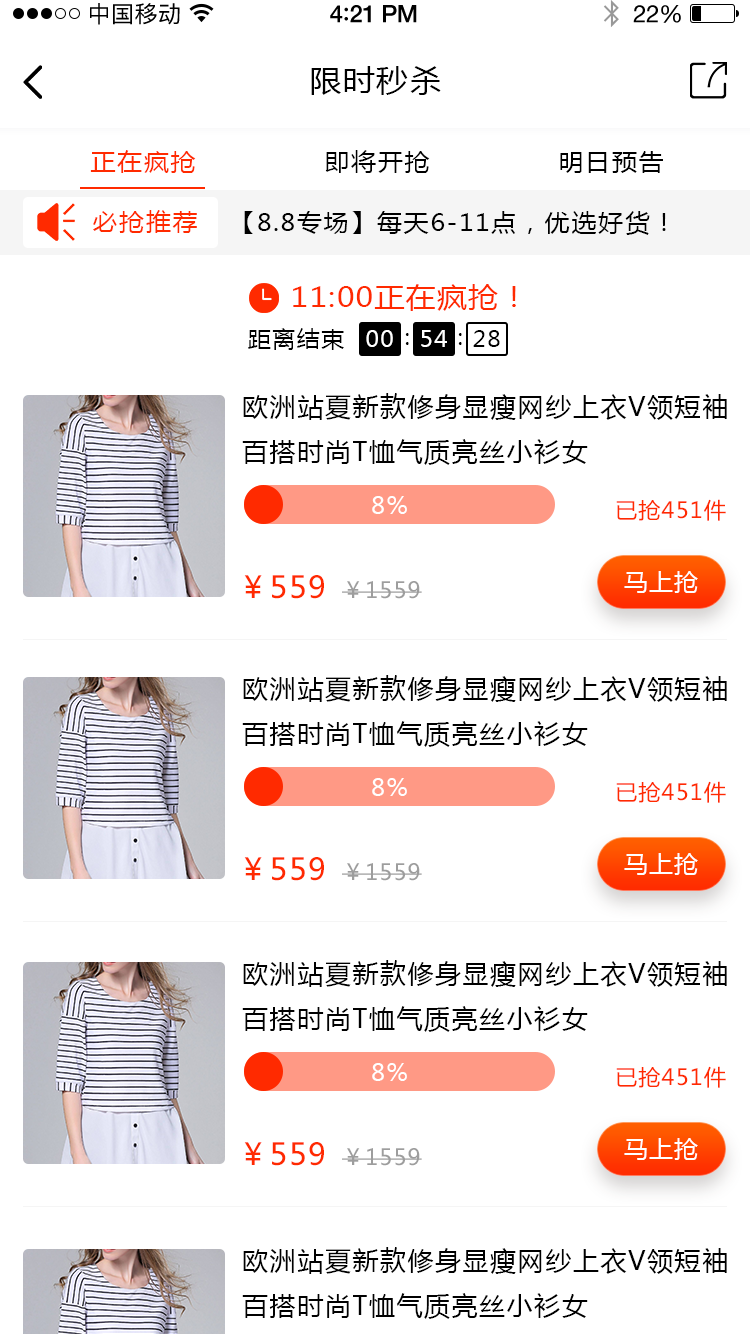
<style>
.page{position:relative;width:750px;height:1334px;background:#ffffff}
.page>*{position:absolute;margin:0}
.t1{font:23px "PingFangSC-Regular";letter-spacing:0.02em;color:#000000}
.t2{font:24px "HelveticaNeue-Medium";letter-spacing:-0.02em;color:#000000}
.t3{font:26px "Avenir-Medium";letter-spacing:-0.02em;color:#000000}
.t4{font:24px "HelveticaNeue";letter-spacing:-0.02em;color:#000000}
.t5{font:30px "MicrosoftYaHei";letter-spacing:0.05em;color:#000000;scale:1.06 1}
.t6{font:24px "MicrosoftYaHei";letter-spacing:0.05em;color:#ff2a00;scale:1.06 1}
.t7{font:24px "MicrosoftYaHei";letter-spacing:0.05em;color:#000000;scale:1.06 1}
.t8{font:28px "MicrosoftYaHei";letter-spacing:0.05em;color:#ff2a00;scale:1.06 1}
.t9{font:22px "MicrosoftYaHei";letter-spacing:0.05em;color:#000000;scale:1.06 1}
.t10{font:22px "MicrosoftYaHei";letter-spacing:0.05em;color:#ffffff;scale:1.06 1}
.t11{font:26px "MicrosoftYaHei";letter-spacing:0.06em;color:#000000;text-transform:uppercase}
.t12{font:24px "MicrosoftYaHei";letter-spacing:0.06em;color:#ffffff;text-transform:uppercase}
.t13{font:22px "MicrosoftYaHei";letter-spacing:0.05em;color:#ff2a00;text-transform:uppercase}
.t14{font:30px "MicrosoftYaHei";letter-spacing:0.05em;color:#ff2a00;text-transform:uppercase}
.t15{font:22px "MicrosoftYaHei";letter-spacing:0.05em;color:#9d9d9d;text-transform:uppercase}
.t16{font:24px "MicrosoftYaHei";letter-spacing:0.05em;color:#ffffff;text-transform:uppercase}
</style>
<div class="page">
<p class="t1" style="left:90px;top:3px;width:90px;height:22px">中国移动</p>
<p class="t2" style="left:330px;top:5px;width:87px;height:18px">4<span class="t3">:</span>21 PM</p>
<p class="t4" style="left:633px;top:5px;width:48px;height:18px">22%</p>
<p class="t5" style="left:311px;top:66px;width:130px;height:29px">限时秒杀</p>
<p class="t6" style="left:90px;top:150px;width:106px;height:23px">正在疯抢</p>
<p class="t7" style="left:325px;top:150px;width:105px;height:23px">即将开抢</p>
<p class="t7" style="left:560px;top:151px;width:103px;height:22px">明日预告</p>
<p class="t6" style="left:93px;top:210px;width:104px;height:23px">必抢推荐</p>
<p class="t7" style="left:244px;top:211px;width:422px;height:24px">【8.8专场】每天6-11点，优选好货！</p>
<p class="t8" style="left:293px;top:284px;width:223px;height:27px">11:00正在疯抢！</p>
<p class="t9" style="left:248px;top:328px;width:96px;height:22px">距离结束</p>
<p class="t10" style="left:366px;top:330px;width:27px;height:17px">00</p>
<p class="t9" style="left:405px;top:333px;width:4px;height:12px">：</p>
<p class="t10" style="left:421px;top:330px;width:26px;height:17px">54</p>
<p class="t9" style="left:458px;top:333px;width:4px;height:12px">：</p>
<p class="t9" style="left:473px;top:330px;width:27px;height:17px">28</p>
<p class="t11" style="left:242px;top:393px;width:485px;height:72px">欧洲站夏新款修身显瘦网纱上衣v领短袖百搭时尚t恤气质亮丝小衫女</p>
<p class="t12" style="left:372px;top:496px;width:35px;height:18px">8%</p>
<p class="t13" style="left:616px;top:499px;width:110px;height:22px">已抢451件</p>
<p class="t14" style="left:244px;top:575px;width:80px;height:24px">￥559</p>
<p class="t15" style="left:342px;top:581px;width:80px;height:18px">￥1559</p>
<p class="t16" style="left:624px;top:571px;width:74px;height:22px">马上抢</p>
<p class="t11" style="left:242px;top:675px;width:485px;height:72px">欧洲站夏新款修身显瘦网纱上衣v领短袖百搭时尚t恤气质亮丝小衫女</p>
<p class="t12" style="left:372px;top:778px;width:35px;height:18px">8%</p>
<p class="t13" style="left:616px;top:781px;width:110px;height:22px">已抢451件</p>
<p class="t14" style="left:244px;top:857px;width:80px;height:24px">￥559</p>
<p class="t16" style="left:624px;top:853px;width:74px;height:22px">马上抢</p>
<p class="t15" style="left:342px;top:863px;width:80px;height:18px">￥1559</p>
<p class="t11" style="left:242px;top:960px;width:485px;height:72px">欧洲站夏新款修身显瘦网纱上衣v领短袖百搭时尚t恤气质亮丝小衫女</p>
<p class="t12" style="left:372px;top:1063px;width:35px;height:18px">8%</p>
<p class="t13" style="left:616px;top:1066px;width:110px;height:22px">已抢451件</p>
<p class="t14" style="left:244px;top:1142px;width:80px;height:24px">￥559</p>
<p class="t16" style="left:624px;top:1138px;width:74px;height:22px">马上抢</p>
<p class="t15" style="left:342px;top:1148px;width:80px;height:18px">￥1559</p>
<p class="t11" style="left:242px;top:1247px;width:485px;height:72px">欧洲站夏新款修身显瘦网纱上衣v领短袖百搭时尚t恤气质亮丝小衫女</p>
</div>
